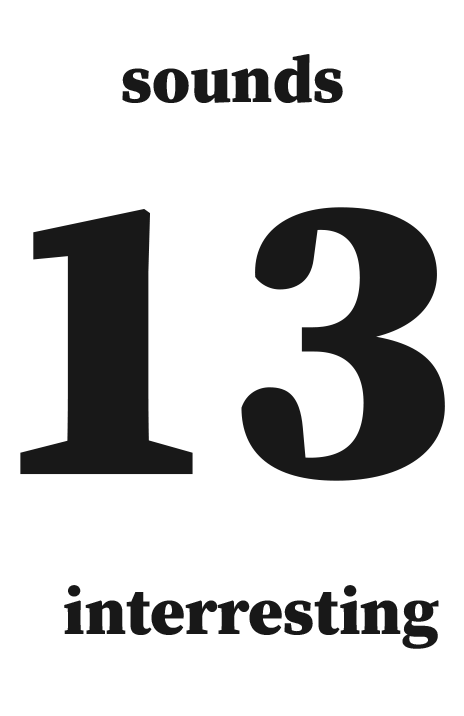
<style>
.page{position:relative;width:464px;height:716px;background:#ffffff}
.page>*{position:absolute;margin:0}
.t1{font:66.7px "SourceSerifRoman-Black";color:#181818}
.t2{font:416.7px "SourceSerifRoman-Black";color:#181818}
</style>
<div class="page">
<p class="t1" style="left:122px;top:54px;width:221px;height:49px">sounds</p>
<p class="t2" style="left:20px;top:207px;width:425px;height:274px">13</p>
<p class="t1" style="left:64px;top:585px;width:375px;height:64px">interresting</p>
</div>
